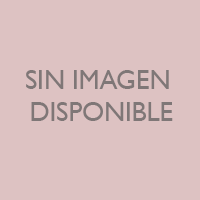
<style>
.page{position:relative;width:200px;height:200px;background:#ddc2c2}
.page>*{position:absolute;margin:0}
.t1{font:26.7px "GillSansMT";color:#7f7777}
</style>
<div class="page">
<p class="t1" style="left:26px;top:70px;width:147px;height:51px;text-align:center">SIN IMAGEN <br>DISPONIBLE</p>
</div>
